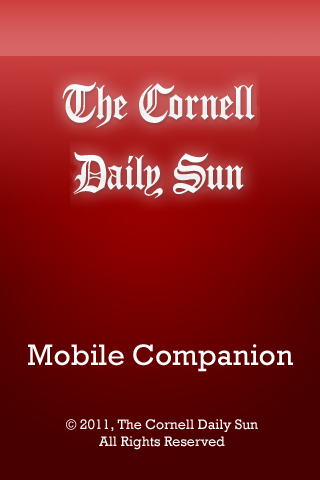
<style>
.page{position:relative;width:320px;height:480px}
.page>*{position:absolute;margin:0}
.t1{font:30px "Rockwell";color:#ffffff}
.t2{font:14px "Rockwell";color:#ffffff}
</style>
<div class="page">
<p class="t1" style="left:28px;top:344px;width:265px;height:28px">Mobile Companion</p>
<p class="t2" style="left:66px;top:419px;width:192px;height:31px;text-align:center">© 2011, The Cornell Daily Sun<br>All Rights Reserved</p>
</div>
